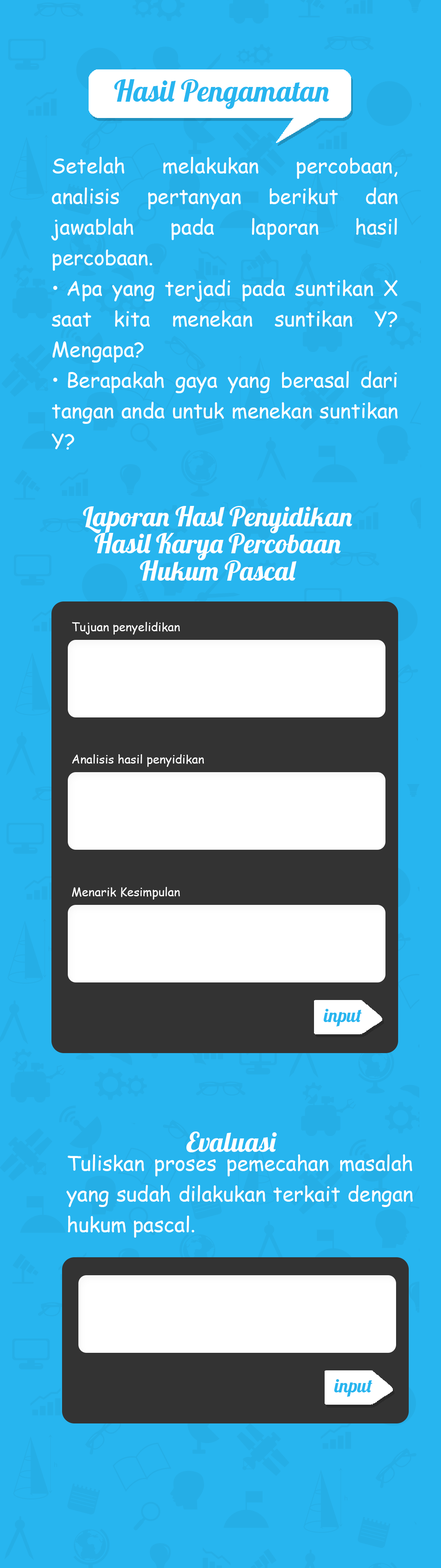
<style>
.page{position:relative;width:441px;height:1568px;background:#27b5ef}
.page>*{position:absolute;margin:0}
.t1{font:29.6px "Lobster-Regular";color:#27b5ef}
.t2{font:20.4px/30.6px "ComicSansMS";color:#ffffff}
.t3{font:27.2px/27.2px "Lobster-Regular";color:#ffffff}
.t4{font:11.9px "ComicSansMS";color:#ffffff}
.t5{font:18.7px "Lobster-Regular";color:#27b5ef}
.t6{font:27.2px "Lobster-Regular";color:#ffffff}
</style>
<div class="page">
<p class="t1" style="left:114px;top:79px;width:215px;height:30px">Hasil Pengamatan</p>
<p class="t2" style="left:51px;top:157px;width:347px;height:293px;text-align:justify">Setelah melakukan percobaan, analisis pertanyan berikut dan jawablah pada laporan hasil percobaan. <br>• Apa yang terjadi pada suntikan X saat kita menekan suntikan Y? Mengapa?<br>• Berapakah gaya yang berasal dari tangan anda untuk menekan suntikan Y?</p>
<p class="t3" style="left:83px;top:506px;width:269px;height:75px;text-align:center">Laporan Hasl Penyidikan Hasil Karya Percobaan  Hukum Pascal</p>
<p class="t4" style="left:72px;top:622px;width:108px;height:13px">Tujuan penyelidikan</p>
<p class="t4" style="left:72px;top:754px;width:132px;height:13px">Analisis hasil penyidikan</p>
<p class="t4" style="left:72px;top:887px;width:108px;height:13px">Menarik Kesimpulan</p>
<p class="t5" style="left:323px;top:1009px;width:39px;height:18px">input</p>
<p class="t6" style="left:186px;top:1131px;width:91px;height:21px">Evaluasi</p>
<p class="t2" style="left:66px;top:1154px;width:347px;height:84px;text-align:justify">Tuliskan proses pemecahan masalah yang sudah dilakukan terkait dengan hukum pascal.</p>
<p class="t5" style="left:334px;top:1379px;width:38px;height:18px">input</p>
</div>
